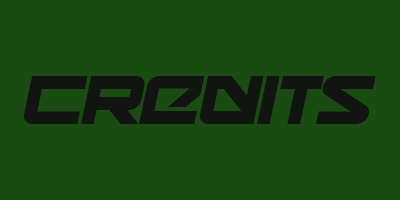
<style>
.page{position:relative;width:400px;height:200px;background:#184c11}
.page>*{position:absolute;margin:0}
.t1{font:66.7px "Onky-Italic";color:#111410}
</style>
<div class="page">
<p class="t1" style="left:23px;top:76px;width:353px;height:48px">Credits</p>
</div>
